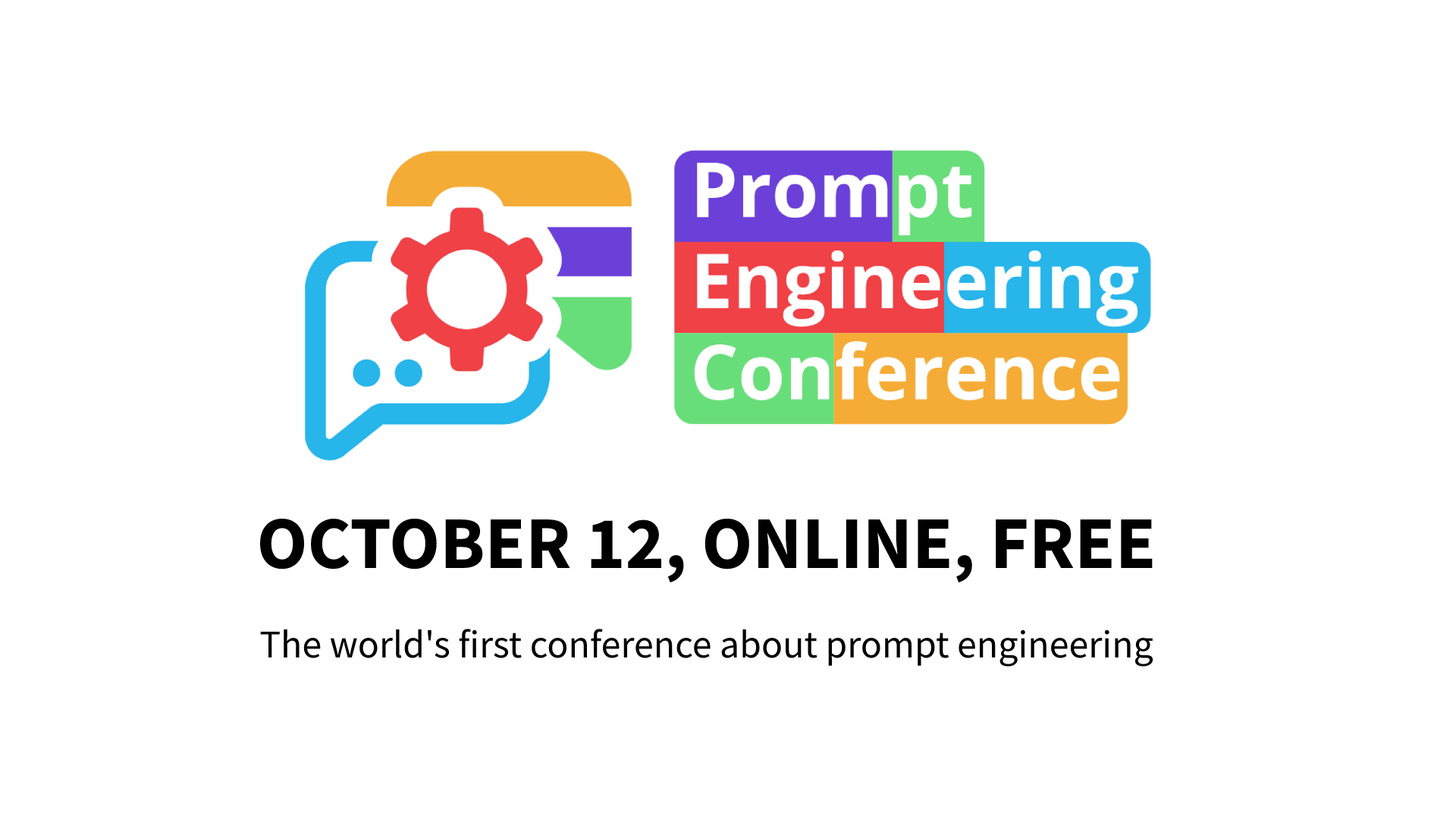
<style>
.page{position:relative;width:1456px;height:819px;background:#ffffff}
.page>*{position:absolute;margin:0}
.t1{font:74.3px "SourceSansPro-Bold";color:#000000}
.t2{font:39.4px "SourceSansPro-Regular";color:#000000}
</style>
<div class="page">
<p class="t1" style="left:260px;top:518px;width:893px;height:65px">OCTOBER 12, ONLINE, FREE</p>
<p class="t2" style="left:260px;top:629px;width:893px;height:38px">The world's first conference about prompt engineering</p>
</div>
